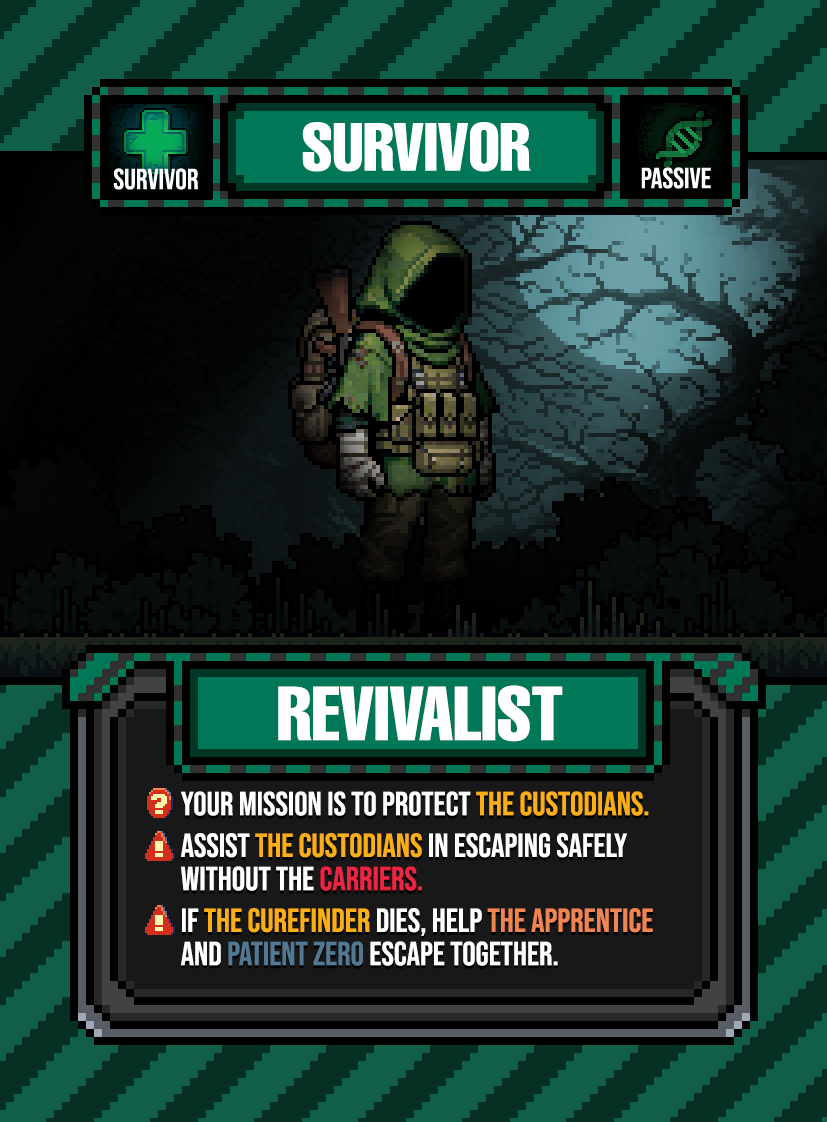
<style>
.page{position:relative;width:827px;height:1122px}
.page>*{position:absolute;margin:0}
.t1{font:75px "HelveticaLTPro-Compressed";color:#ffffff}
.t2{font:33.3px/31.2px "BebasNeue-Regular";color:#ffffff}
.t3{font:33.3px/31.2px "BebasNeue-Regular";color:#fbae18}
.t4{font:33.3px/41.7px "BebasNeue-Regular";color:#ffffff}
.t5{font:33.3px/33.3px "BebasNeue-Regular";color:#ffffff}
.t6{font:33.3px/33.3px "BebasNeue-Regular";color:#ee2542}
.t7{font:33.3px/41.7px "BebasNeue-Regular";color:#fbae18}
.t8{font:33.3px/41.7px "BebasNeue-Regular";color:#f08554}
.t9{font:33.3px/33.3px "BebasNeue-Regular";color:#537892}
</style>
<div class="page">
<p class="t1" style="left:278px;top:685px;width:285px;height:57px">REVIVALIST</p>
<p class="t2" style="left:181px;top:791px;width:472px;height:175px">Your mission is to protect <span class="t3">the Custodians.<br></span><span class="t4">Assist </span><span class="t3">the Custodians</span><span class="t4"> in escaping safely </span><span class="t5">without the </span><span class="t6">Carriers.<br></span><span class="t4">If </span><span class="t7">the Curefinder</span><span class="t4"> dies, help </span><span class="t8">the Apprentice <br></span><span class="t5">and </span><span class="t9">Patient Zero</span><span class="t5"> escape together.</span></p>
</div>
